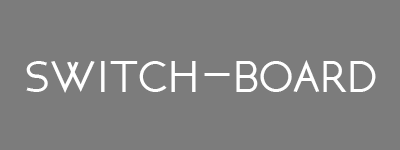
<style>
.page{position:relative;width:400px;height:150px;background:#7c7c7c}
.page>*{position:absolute;margin:0}
.t1{font:58.3px "NEOTERIC-Bold";color:#ffffff}
</style>
<div class="page">
<p class="t1" style="left:26px;top:60px;width:350px;height:33px">switch-board</p>
</div>
